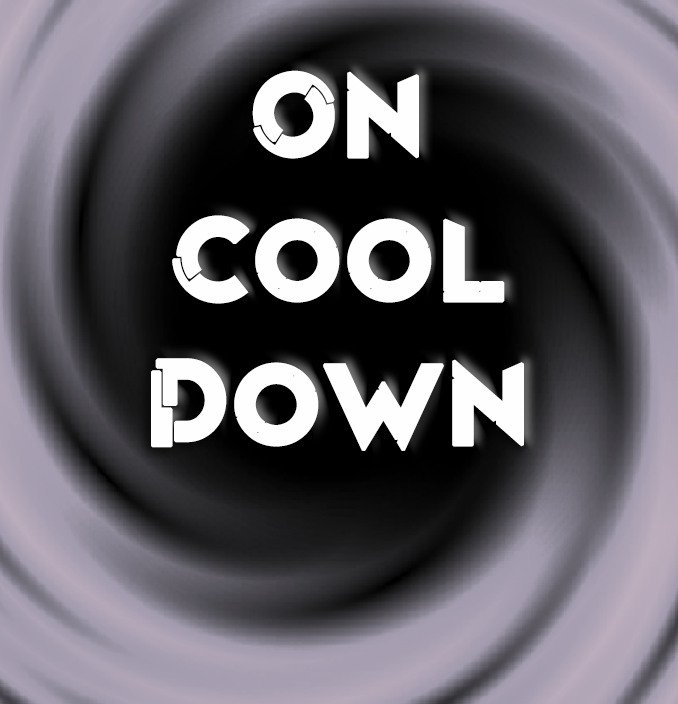
<style>
.page{position:relative;width:678px;height:704px}
.page>*{position:absolute;margin:0}
.t1{font:120px "OriginTechDemoRegular";color:#fefefe;font-weight:bold}
</style>
<div class="page">
<p class="t1" style="left:151px;top:70px;width:373px;height:381px;text-align:center">On<br>Cool<br>Down</p>
</div>
